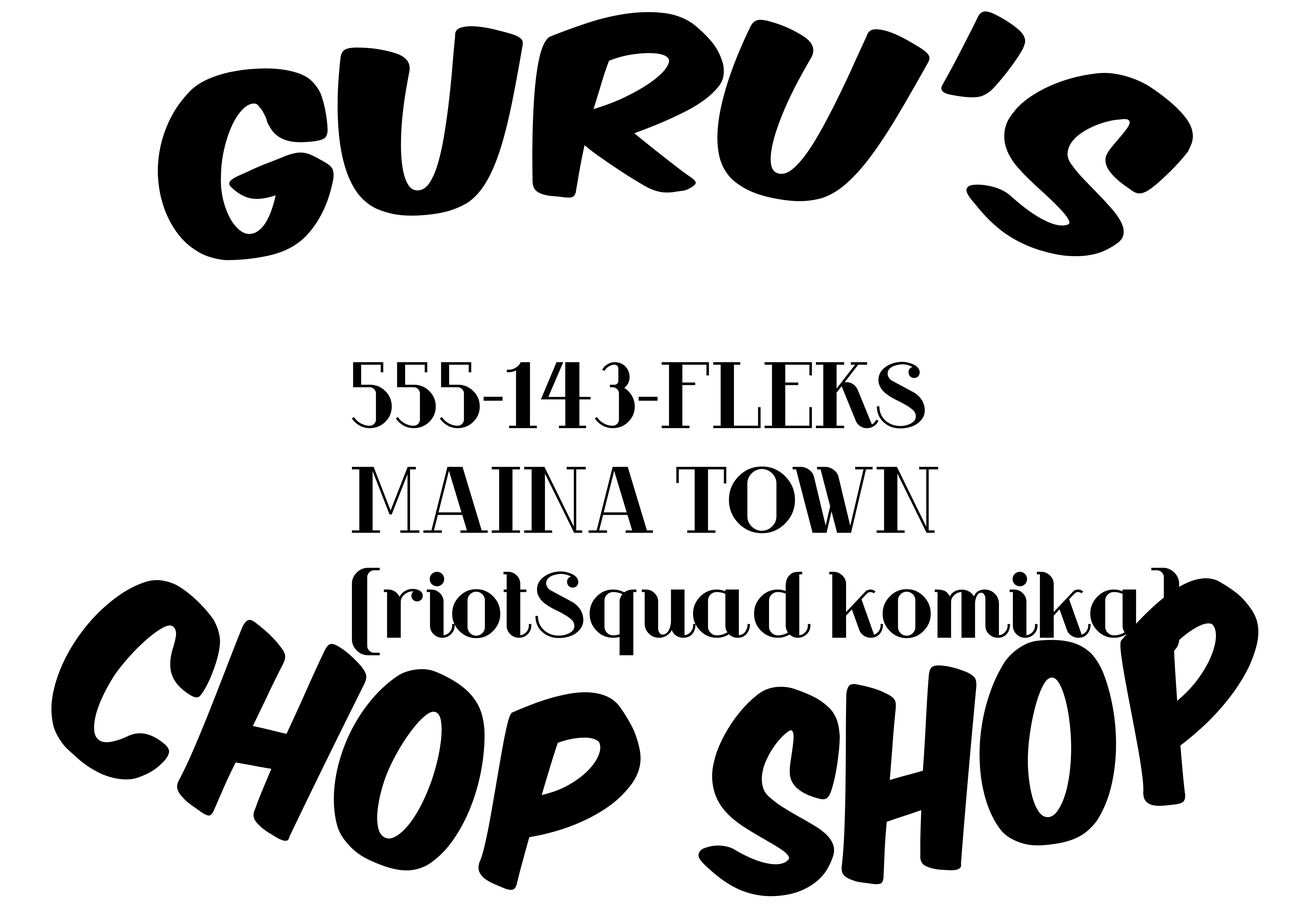
<style>
.page{position:relative;width:1299px;height:918px;background:#ffffff}
.page>*{position:absolute;margin:0}
.t1{font:205px "KomikaAxis";color:#000000;scale:1.14 1}
.t2{font:87.3px "RiotSquadNF";color:#000000}
.t3{font:230.2px "KomikaAxis";color:#000000;scale:0.84 1}
</style>
<div class="page">
<p class="t1" style="left:158px;top:11px;width:1035px;height:249px">GURU’s</p>
<p class="t2" style="left:352px;top:362px;width:827px;height:293px">555-143-FLEKS<br>MAINA TOWN<br>(riotSquad komika)</p>
<p class="t3" style="left:51px;top:578px;width:1207px;height:319px">Chop SHOP</p>
</div>
